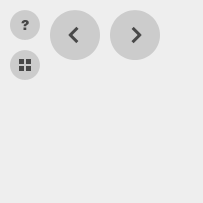
<style>
.page{position:relative;width:203px;height:203px;background:#eeeeee}
.page>*{position:absolute;margin:0}
.t1{font:13.4px "HelveticaLT-Black";color:#484848;text-transform:uppercase}
</style>
<div class="page">
<p class="t1" style="left:21px;top:20px;width:8px;height:10px">?</p>
</div>
